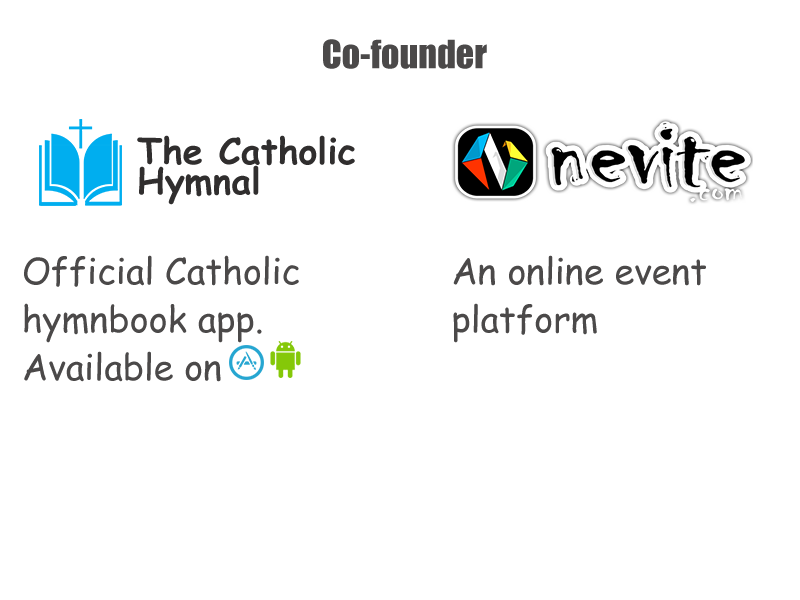
<style>
.page{position:relative;width:800px;height:600px;background:#ffffff}
.page>*{position:absolute;margin:0}
.t1{font:36px "Impact";color:#4b4949}
.t2{font:36px/30px "ComicSansMS-Bold";color:#302e2e}
.t3{font:36px/48px "ComicSansMS";color:#4b4949}
</style>
<div class="page">
<p class="t1" style="left:323px;top:39px;width:164px;height:30px">Co-founder</p>
<p class="t2" style="left:137px;top:135px;width:218px;height:70px">The Catholic Hymnal</p>
<p class="t3" style="left:24px;top:255px;width:275px;height:127px">Official Catholic  hymnbook app. <br>Available on</p>
<p class="t3" style="left:453px;top:255px;width:253px;height:88px">An online event platform</p>
</div>
